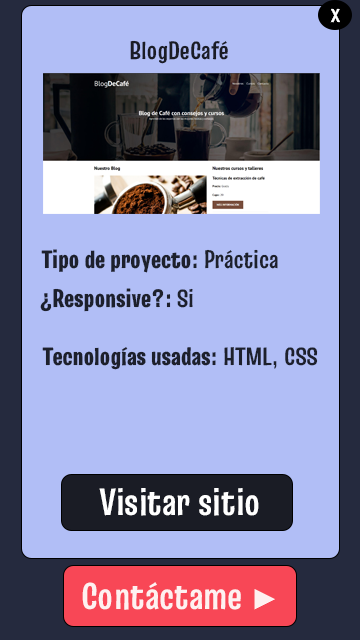
<style>
.page{position:relative;width:360px;height:640px;background:#b1bef6}
.page>*{position:absolute;margin:0}
.t1{font:25px "TruculentaRoman-Bold";color:#ffffff}
.t2{font:25px "TruculentaRoman-Bold";color:#1a1c25}
.t3{font:25px "TruculentaRoman-Black";color:#1d202c}
.t4{font:25px "TruculentaRoman-Bold";color:#1d202c}
.t5{font:37.5px "TruculentaRoman-Bold";color:#ffffff}
.t6{font:37.5px "TruculentaRoman-Bold";color:#fef1f1}
.t7{font:29.2px "ArialMT";color:#fef1f1}
</style>
<div class="page">
<p class="t1" style="left:330px;top:8px;width:10px;height:15px">x</p>
<p class="t2" style="left:130px;top:40px;width:98px;height:24px">BlogDeCafé</p>
<p class="t3" style="left:41px;top:249px;width:237px;height:24px">Tipo de proyecto:<span class="t4"> Práctica</span></p>
<p class="t3" style="left:40px;top:288px;width:153px;height:24px">¿Responsive?: <span class="t4">Si</span></p>
<p class="t3" style="left:42px;top:347px;width:276px;height:23px">Tecnologías usadas:<span class="t4"> HTML, CSS</span></p>
<p class="t5" style="left:99px;top:488px;width:160px;height:28px">Visitar sitio</p>
<p class="t6" style="left:82px;top:582px;width:193px;height:28px">Contáctame <span class="t7">►</span></p>
</div>
